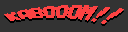
<style>
.page{position:relative;width:128px;height:32px;background:#333333}
.page>*{position:absolute;margin:0}
.t1{font:12px "MegaMan-2";color:#fc4242}
</style>
<div class="page">
<p class="t1" style="left:4px;top:5px;width:120px;height:19px">KABOOoM!!</p>
</div>
